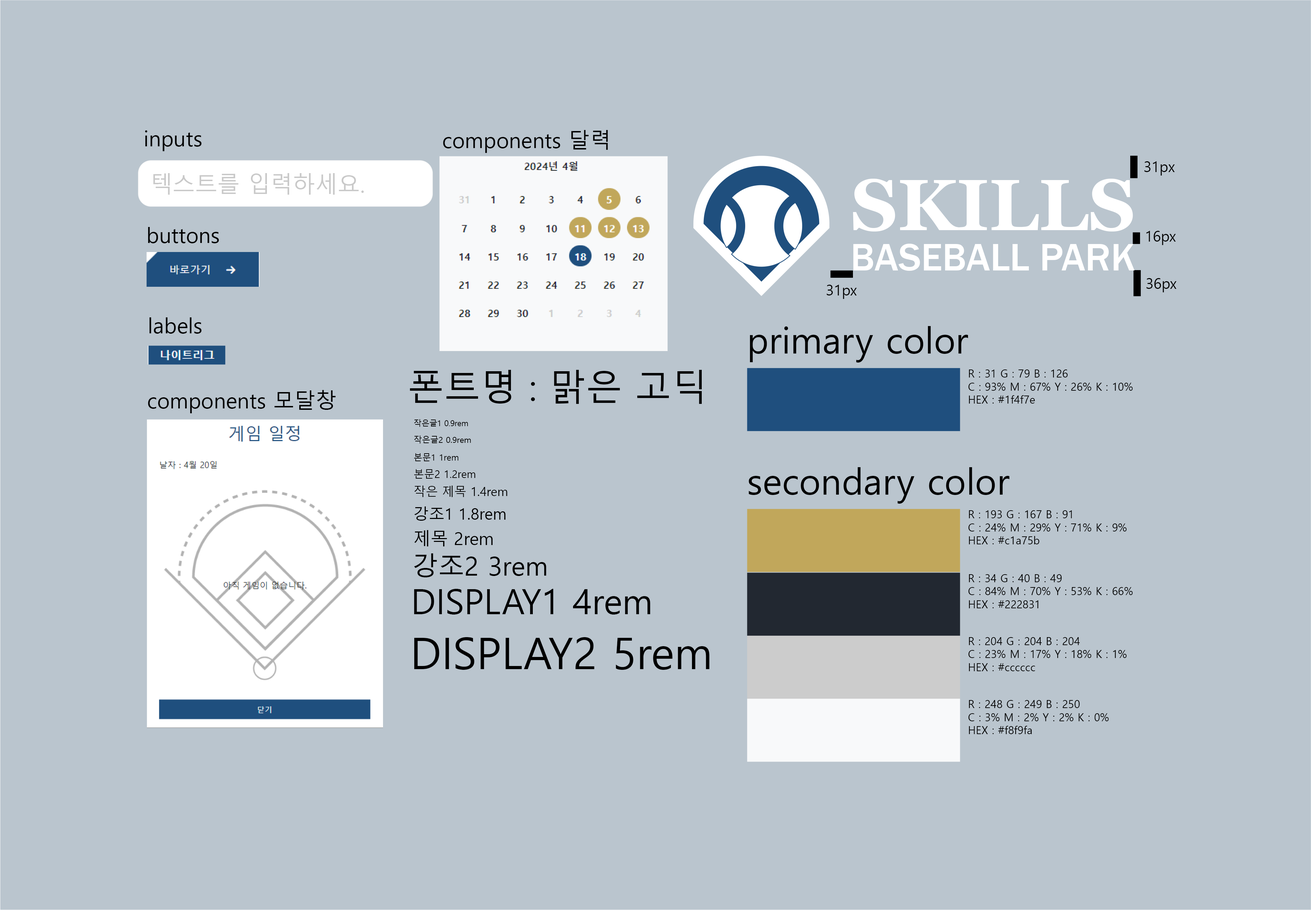
<style>
.page{position:relative;width:1311px;height:910px;background:#bac5ce}
.page>*{position:absolute;margin:0}
.t1{font:21.2px "MalgunGothic";color:#000000}
.t2{font:14.5px "MalgunGothic";color:#000000}
.t3{font:22.5px "MalgunGothic";color:#c9c9c9}
.t4{font:72.4px "Georgia-Bold";color:#ffffff}
.t5{font:39.6px "FranklinGothic-Medium";color:#ffffff}
.t6{font:36.2px "MalgunGothic";color:#000000}
.t7{font:10.9px "MalgunGothic";color:#000000}
.t8{font:7.8px "MalgunGothic";color:#000000}
.t9{font:8.3px "MalgunGothic";color:#000000}
.t10{font:8.7px "MalgunGothic";color:#000000}
.t11{font:10.4px "MalgunGothic";color:#000000}
.t12{font:12.2px "MalgunGothic";color:#000000}
.t13{font:15.6px "MalgunGothic";color:#000000}
.t14{font:17.4px "MalgunGothic";color:#000000}
.t15{font:26.1px "MalgunGothic";color:#000000}
.t16{font:34.7px "MalgunGothic";color:#000000}
.t17{font:43.4px "MalgunGothic";color:#000000}
</style>
<div class="page">
<p class="t1" style="left:145px;top:130px;width:57px;height:21px">inputs</p>
<p class="t1" style="left:443px;top:130px;width:165px;height:23px">components 달력</p>
<p class="t2" style="left:1144px;top:161px;width:31px;height:14px">31px</p>
<p class="t3" style="left:153px;top:173px;width:211px;height:22px">텍스트를 입력하세요.</p>
<p class="t4" style="left:853px;top:179px;width:280px;height:52px">SKILLS</p>
<p class="t1" style="left:148px;top:227px;width:71px;height:16px">buttons</p>
<p class="t2" style="left:1146px;top:231px;width:30px;height:14px">16px</p>
<p class="t5" style="left:853px;top:244px;width:282px;height:27px">BASEBALL PARK</p>
<p class="t2" style="left:1146px;top:278px;width:30px;height:14px">36px</p>
<p class="t2" style="left:826px;top:285px;width:31px;height:14px">31px</p>
<p class="t1" style="left:149px;top:317px;width:53px;height:17px">labels</p>
<p class="t6" style="left:750px;top:326px;width:218px;height:36px">primary color</p>
<p class="t6" style="left:410px;top:370px;width:292px;height:34px">폰트명 : 맑은 고딕</p>
<p class="t7" style="left:968px;top:369px;width:164px;height:34px">R : 31 G : 79 B : 126<br>C : 93% M : 67% Y : 26% K : 10%<br>HEX : #1f4f7e</p>
<p class="t1" style="left:148px;top:390px;width:188px;height:23px">components 모달창</p>
<p class="t8" style="left:414px;top:419px;width:54px;height:8px">작은글1 0.9rem</p>
<p class="t9" style="left:414px;top:435px;width:57px;height:8px">작은글2 0.9rem</p>
<p class="t10" style="left:414px;top:453px;width:44px;height:8px">본문1 1rem</p>
<p class="t11" style="left:414px;top:469px;width:61px;height:9px">본문2 1.2rem</p>
<p class="t6" style="left:749px;top:467px;width:260px;height:37px">secondary color</p>
<p class="t12" style="left:414px;top:485px;width:93px;height:12px">작은 제목 1.4rem</p>
<p class="t13" style="left:414px;top:506px;width:92px;height:15px">강조1 1.8rem</p>
<p class="t7" style="left:968px;top:510px;width:159px;height:34px">R : 193 G : 167 B : 91<br>C : 24% M : 29% Y : 71% K : 9%<br>HEX : #c1a75b</p>
<p class="t14" style="left:414px;top:530px;width:79px;height:16px">제목 2rem</p>
<p class="t15" style="left:414px;top:553px;width:132px;height:24px">강조2 3rem</p>
<p class="t7" style="left:968px;top:574px;width:164px;height:34px">R : 34 G : 40 B : 49<br>C : 84% M : 70% Y : 53% K : 66%<br>HEX : #222831</p>
<p class="t16" style="left:414px;top:589px;width:236px;height:25px">DISPLAY1 4rem</p>
<p class="t17" style="left:414px;top:637px;width:295px;height:33px">DISPLAY2 5rem</p>
<p class="t7" style="left:968px;top:637px;width:159px;height:34px">R : 204 G : 204 B : 204<br>C : 23% M : 17% Y : 18% K : 1%<br>HEX : #cccccc</p>
<p class="t7" style="left:968px;top:700px;width:141px;height:34px">R : 248 G : 249 B : 250<br>C : 3% M : 2% Y : 2% K : 0%<br>HEX : #f8f9fa</p>
</div>
